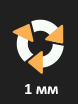
<style>
.page{position:relative;width:78px;height:104px;background:#202020}
.page>*{position:absolute;margin:0}
.t1{font:12px "Calibri-Bold";color:#ffffff}
</style>
<div class="page">
<p class="t1" style="left:25px;top:84px;width:33px;height:10px">1 мм</p>
</div>
